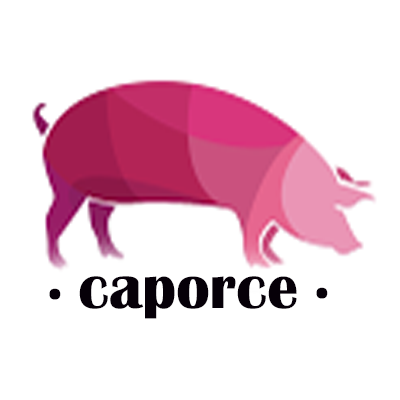
<style>
.page{position:relative;width:400px;height:400px;background:#ffffff}
.page>*{position:absolute;margin:0}
.t1{font:62.5px "BritannicBold";color:#060008}
</style>
<div class="page">
<p class="t1" style="left:79px;top:276px;width:218px;height:43px">caporce</p>
<p class="t1" style="left:49px;top:288px;width:12px;height:12px">.</p>
<p class="t1" style="left:316px;top:287px;width:12px;height:12px">.</p>
</div>
